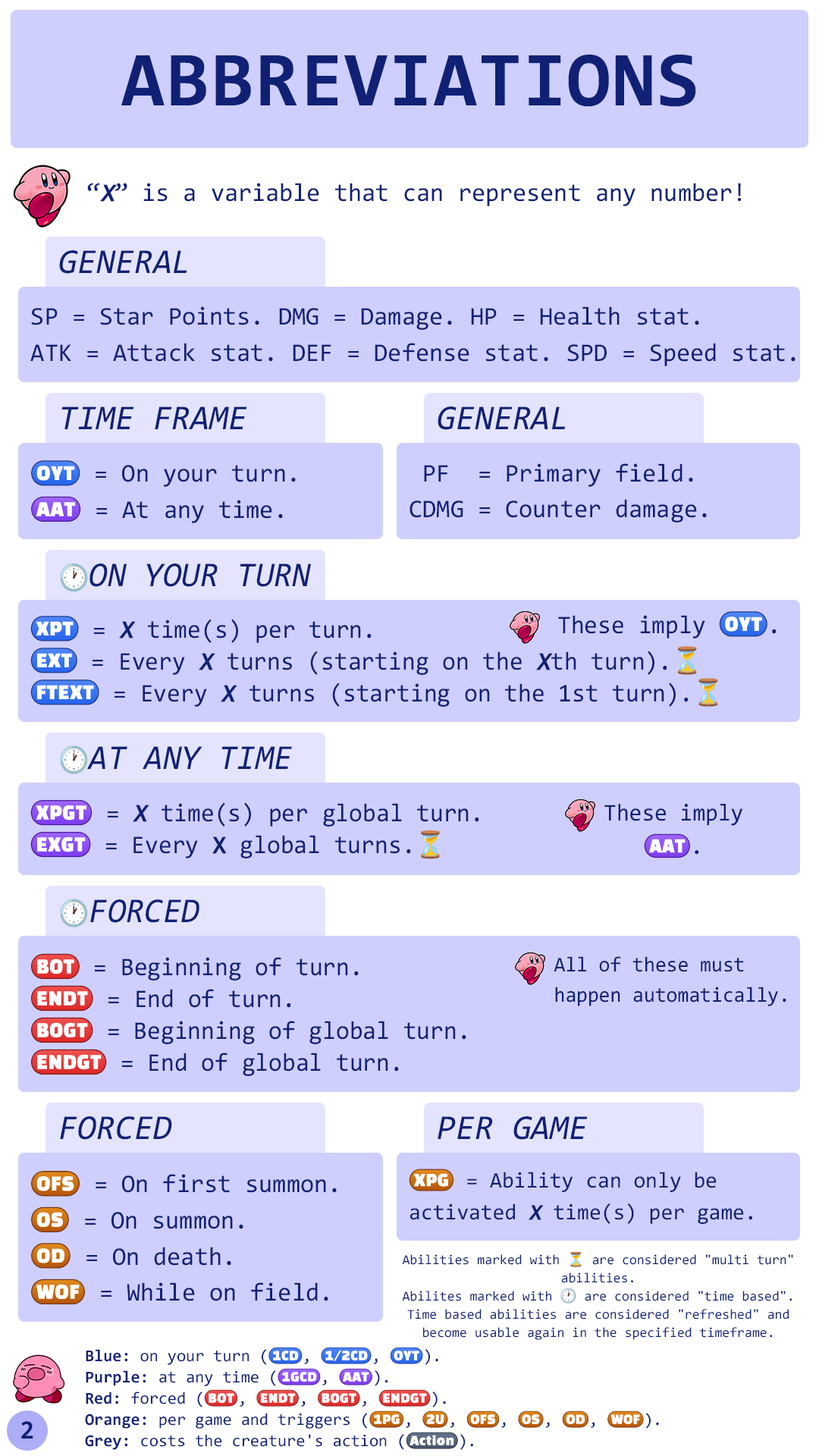
<style>
.page{position:relative;width:819px;height:1456px;background:#cfcfff}
.page>*{position:absolute;margin:0}
.t1{font:78.3px "Consolas-Bold";letter-spacing:0.02em;color:#102175;text-transform:uppercase}
.t2{font:25.5px "Consolas";color:#102175}
.t3{font:25.5px "Consolas";color:#102175;font-weight:bold;font-style:italic}
.t4{font:35px "Consolas-Italic";color:#102175}
.t5{font:25.5px "Consolas"}
.t6{font:25.5px "stoogedings-Regular"}
.t7{font:35px "Consolas-Italic";color:#102175;scale:0.96 1}
.t8{font:25.5px "NotoColorEmoji-SVG";color:#102175;scale:0.96 1}
.t9{font:25.5px/31.8px "Consolas";scale:0.96 1}
.t10{font:25.5px/31.8px "stoogedings-Regular";scale:0.96 1}
.t11{font:25.5px/31.8px "Consolas";font-weight:bold;font-style:italic;scale:0.96 1}
.t12{font:25.5px/31.8px "NotoColorEmoji-SVG";scale:0.96 1}
.t13{font:25.5px "Consolas";scale:0.96 1}
.t14{font:25.5px "stoogedings-Regular";scale:0.96 1}
.t15{font:25.5px/31.8px "Consolas";font-weight:bold;scale:0.96 1}
.t16{font:24.1px "Consolas";scale:0.96 1}
.t17{font:24.1px "stoogedings-Regular";scale:0.96 1}
.t18{font:35px "Consolas-Italic";scale:0.96 1}
.t19{font:25.5px "NotoColorEmoji-SVG";scale:0.96 1}
.t20{font:21.3px "Consolas";color:#102175;scale:0.96 1}
.t21{font:22.2px "Consolas"}
.t22{font:22.2px "stoogedings-Regular"}
.t23{font:22.2px "Consolas";font-weight:bold;font-style:italic}
.t24{font:25.6px "Consolas"}
.t25{font:25.6px "stoogedings-Regular"}
.t26{font:13.6px/18.2px "Consolas";color:#102175}
.t27{font:13.6px/18.2px "NotoColorEmoji-SVG";color:#102175}
.t28{font:16.7px/21.2px "Consolas"}
.t29{font:16.7px/21.2px "Consolas-Bold"}
.t30{font:16.7px/21.2px "stoogedings-Regular"}
.t31{font:26.4px "Consolas-Bold";color:#102175}
</style>
<div class="page">
<p class="t1" style="left:121px;top:55px;width:575px;height:52px">Abbreviations</p>
<p class="t2" style="left:87px;top:183px;width:655px;height:23px">“<span class="t3">X</span>” is a variable that can represent any number!</p>
<p class="t4" style="left:59px;top:250px;width:128px;height:24px">GENERAL</p>
<p class="t2" style="left:30px;top:306px;width:765px;height:60px">SP = Star Points. DMG = Damage. HP = Health stat.<br>ATK = Attack stat. DEF = Defense stat. SPD = Speed stat.</p>
<p class="t4" style="left:61px;top:406px;width:186px;height:23px">TIME FRAME</p>
<p class="t4" style="left:438px;top:406px;width:128px;height:24px">GENERAL</p>
<p class="t5" style="left:31px;top:460px;width:265px;height:63px"><span class="t6">(OYT)</span> = On your turn.<br><span class="t6">(AAT)</span> = At any time.</p>
<p class="t2" style="left:409px;top:463px;width:298px;height:59px">PF  = Primary field.<br>CDMG = Counter damage.</p>
<p class="t7" style="left:60px;top:563px;width:251px;height:29px"><span class="t8">🕐</span>ON YOUR TURN</p>
<p class="t9" style="left:30px;top:616px;width:687px;height:91px"><span class="t10">(XPT)</span> = <span class="t11">X</span> time(s) per turn.<br><span class="t10">(EXT)</span> = Every <span class="t11">X</span> turns (starting on the <span class="t11">X</span>th turn).<span class="t12">⏳<br></span><span class="t10">(FTEXT)</span> = Every <span class="t11">X</span> turns (starting on the 1st turn).<span class="t12">⏳</span></p>
<p class="t13" style="left:558px;top:611px;width:219px;height:28px">These imply <span class="t14">(OYT)</span>.</p>
<p class="t7" style="left:60px;top:745px;width:232px;height:29px"><span class="t8">🕐</span>AT ANY TIME</p>
<p class="t9" style="left:30px;top:800px;width:449px;height:59px"><span class="t10">(XPGT)</span> = <span class="t11">X</span> time(s) per global turn.<br><span class="t10">(EXGT)</span> = Every <span class="t15">X</span> global turns.<span class="t12">⏳</span></p>
<p class="t16" style="left:604px;top:804px;width:138px;height:54px;text-align:center">These imply<br><span class="t17">(AAT)</span>.</p>
<p class="t18" style="left:60px;top:899px;width:139px;height:28px"><span class="t19">🕐</span>FORCED</p>
<p class="t9" style="left:31px;top:953px;width:435px;height:123px"><span class="t10">(BOT)</span> = Beginning of turn.<br><span class="t10">(ENDT)</span> = End of turn.<br><span class="t10">(BOGT)</span> = Beginning of global turn.<br><span class="t10">(ENDGT)</span> = End of global turn.</p>
<p class="t20" style="left:554px;top:956px;width:232px;height:50px">All of these must happen automatically.</p>
<p class="t4" style="left:60px;top:1116px;width:112px;height:24px">FORCED</p>
<p class="t4" style="left:438px;top:1116px;width:150px;height:24px">PER GAME</p>
<p class="t21" style="left:409px;top:1169px;width:343px;height:55px"><span class="t22">(XPG)</span> = Ability can only be activated <span class="t23">X</span> time(s) per game.</p>
<p class="t24" style="left:31px;top:1171px;width:306px;height:133px"><span class="t25">(OFS)</span> = On first summon.<br><span class="t25">(OS)</span> = On summon.<br><span class="t25">(OD)</span> = On death.<br><span class="t25">(WOF)</span> = While on field.</p>
<p class="t26" style="left:402px;top:1251px;width:391px;height:89px;text-align:center">Abilities marked with <span class="t27">⏳</span> are considered "multi turn" abilities.<br>Abilites marked with <span class="t27">🕐</span> are considered "time based".<br>Time based abilities are considered "refreshed" and become usable again in the specified timeframe.</p>
<p class="t28" style="left:85px;top:1347px;width:574px;height:103px"><span class="t29">Blue:</span> on your turn (<span class="t30">(1CD)</span>, <span class="t30">(1/2CD)</span>, <span class="t30">(OYT)</span>).<br><span class="t29">Purple:</span> at any time (<span class="t30">(1GCD)</span>, <span class="t30">(AAT)</span>).<br><span class="t29">Red:</span> forced (<span class="t30">(BOT)</span>, <span class="t30">(ENDT)</span>, <span class="t30">(BOGT)</span>, <span class="t30">(ENDGT)</span>).<br><span class="t29">Orange:</span> per game and triggers (<span class="t30">(1PG)</span>, <span class="t30">(2U)</span>, <span class="t30">(OFS)</span>, <span class="t30">(OS)</span>, <span class="t30">(OD)</span>, <span class="t30">(WOF)</span>).<br><span class="t29">Grey:</span> costs the creature's action (<span class="t30">(Action)</span>).</p>
<p class="t31" style="left:21px;top:1421px;width:12px;height:18px">2</p>
</div>
